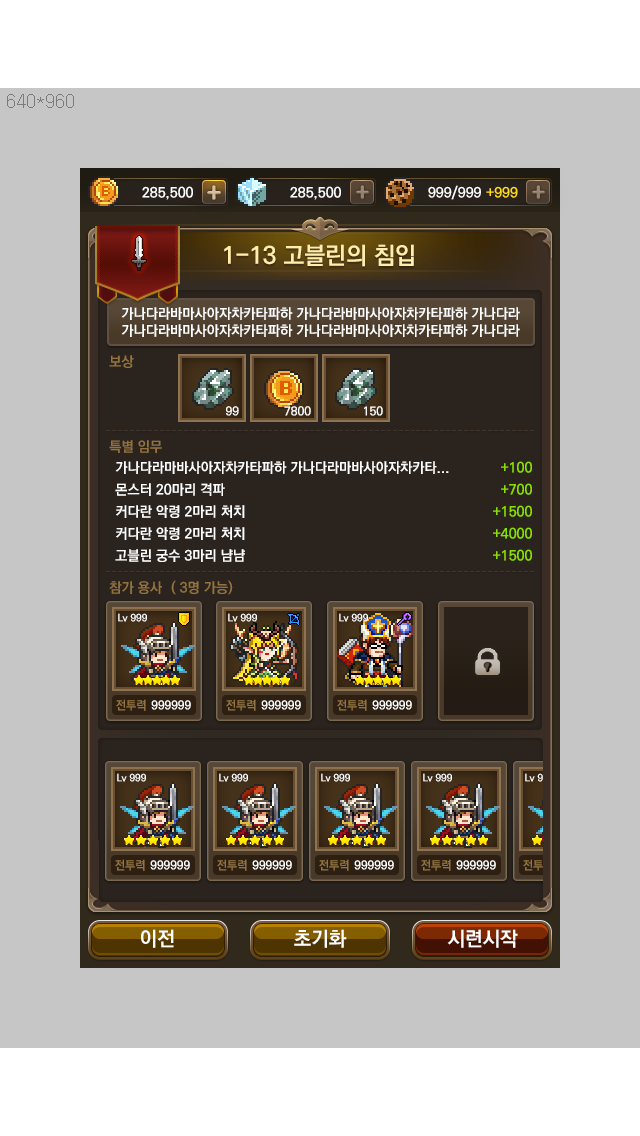
<style>
.page{position:relative;width:640px;height:1136px;background:#c6c6c6}
.page>*{position:absolute;margin:0}
.t1{font:24px "KoPubDotumBold";color:#ffedab}
.t2{font:14px "KoPubDotumBold";color:#ffffff}
.t3{font:14px "KoPubDotumBold";color:#937340}
.t4{font:11.9px "KoPubDotumBold";color:#ffffff}
.t5{font:14px/22px "KoPubDotumBold";color:#ffffff}
.t6{font:14px/22px "KoPubDotumBold";color:#8ae001}
.t7{font:10px "KoPubDotumBold";color:#ffffff}
.t8{font:12px "KoPubDotumBold";color:#937441}
.t9{font:12px "KoPubDotumBold";color:#ffffff}
.t10{font:20px "KoPubDotumBold";color:#ffffff}
</style>
<div class="page">
<p class="t1" style="left:224px;top:244px;width:190px;height:23px">1-13 고블린의 침입</p>
<p class="t2" style="left:121px;top:307px;width:399px;height:30px">가나다라바마사아자차카타파하 가나다라바마사아자차카타파하 가나다라<br>가나다라바마사아자차카타파하 가나다라바마사아자차카타파하 가나다라</p>
<p class="t3" style="left:109px;top:355px;width:25px;height:13px">보상</p>
<p class="t4" style="left:226px;top:406px;width:13px;height:10px">99</p>
<p class="t4" style="left:284px;top:406px;width:27px;height:10px">7800</p>
<p class="t4" style="left:364px;top:406px;width:19px;height:10px">150</p>
<p class="t3" style="left:109px;top:440px;width:53px;height:13px">특별 임무</p>
<p class="t5" style="left:115px;top:461px;width:334px;height:101px">가나다라마바사아자차카타파하 가나다라마바사아자차카타...<br>몬스터 20마리 격파<br>커다란 악령 2마리 처치<br>커다란 악령 2마리 처치<br>고블린 궁수 3마리 냠냠</p>
<p class="t6" style="left:493px;top:461px;width:39px;height:100px;text-align:right">+100<br>+700<br>+1500<br>+4000<br>+1500</p>
<p class="t3" style="left:109px;top:581px;width:53px;height:13px">참가 용사</p>
<p class="t3" style="left:171px;top:580px;width:62px;height:15px">( 3명 가능)</p>
<p class="t7" style="left:118px;top:613px;width:29px;height:9px">Lv 999</p>
<p class="t7" style="left:228px;top:613px;width:29px;height:9px">Lv 999</p>
<p class="t7" style="left:339px;top:613px;width:29px;height:9px">Lv 999</p>
<p class="t8" style="left:116px;top:699px;width:30px;height:12px">전투력</p>
<p class="t9" style="left:151px;top:700px;width:40px;height:10px">999999</p>
<p class="t8" style="left:226px;top:699px;width:30px;height:12px">전투력</p>
<p class="t9" style="left:261px;top:700px;width:40px;height:10px">999999</p>
<p class="t8" style="left:337px;top:699px;width:30px;height:12px">전투력</p>
<p class="t9" style="left:372px;top:700px;width:40px;height:10px">999999</p>
<p class="t10" style="left:141px;top:929px;width:33px;height:19px">이전</p>
<p class="t10" style="left:294px;top:929px;width:53px;height:19px">초기화</p>
<p class="t10" style="left:447px;top:929px;width:71px;height:19px">시련시작</p>
</div>
